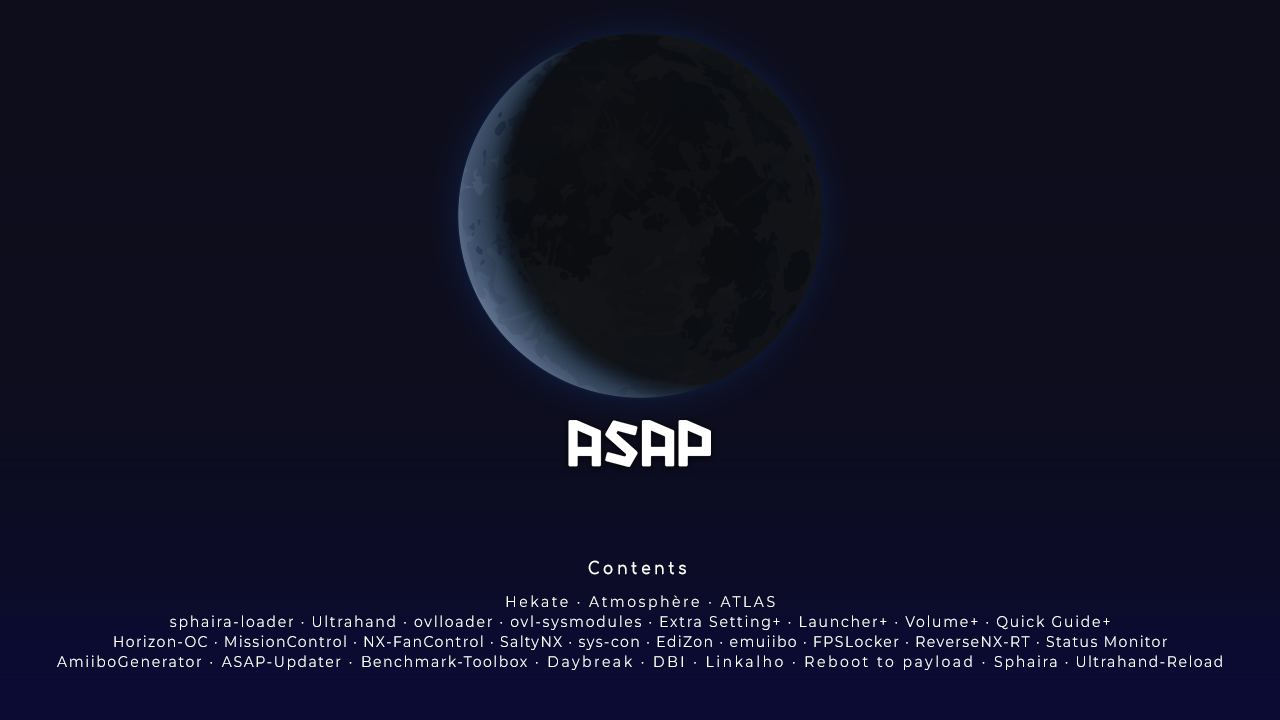
<style>
.page{position:relative;width:1280px;height:720px;background:#0d0d1c}
.page>*{position:absolute;margin:0}
.t1{font:17.1px "Comfortaa-Bold";letter-spacing:0.22em;color:#ffffff;scale:0.92 1}
.t2{font:15.6px/20px "Montserrat-Regular";letter-spacing:0.1em;color:#ffffff;scale:0.9 1}
.t3{font:15.6px/20px "Montserrat-Regular";letter-spacing:0.18em;color:#ffffff;scale:0.9 1}
.t4{font:15.6px/20px "Montserrat-Regular";letter-spacing:0.125em;color:#ffffff;scale:0.9 1}
.t5{font:15.6px/20px "Montserrat-Regular";letter-spacing:0.12em;color:#ffffff;scale:0.9 1}
.t6{font:15.6px/20px "Montserrat-Regular";letter-spacing:0.11em;color:#ffffff;scale:0.9 1}
</style>
<div class="page">
<p class="t1" style="left:588px;top:560px;width:98px;height:15px">Contents</p>
<p class="t2" style="left:57px;top:595px;width:1165px;height:75px;text-align:center"><span class="t3">Hekate · Atmosphère · ATLAS<br></span><span class="t4">sphaira-loader · Ultrahand · ovlloader · ovl-sysmodules · Extra Setting+ · Launcher+ · Volume+ · Quick Guide+<br></span>Horizon-OC · MissionControl · NX-FanControl · SaltyNX · sys-con · EdiZon · emuiibo · FPSLocker · ReverseNX-RT · Status Monitor<br><span class="t5">AmiiboGenerator</span><span class="t3"> · </span><span class="t6">ASAP-Updater</span><span class="t3"> · </span><span class="t6">Benchmark-Toolbox</span><span class="t3"> · Daybreak · DBI · Linkalho · Reboot to payload · </span><span class="t4">Sphaira · </span><span class="t6">Ultrahand-Reload</span></p>
</div>
